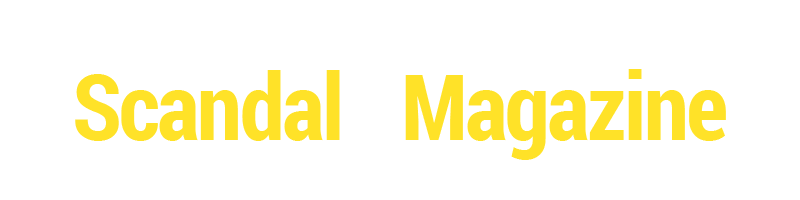
<style>
.page{position:relative;width:800px;height:200px;background:#ffffff}
.page>*{position:absolute;margin:0}
.t1{font:91.7px "RobotoCondensed-Bold";letter-spacing:-0.025em;color:#ffe228}
</style>
<div class="page">
<p class="t1" style="left:75px;top:69px;width:651px;height:91px">Scandal   Magazine</p>
</div>
